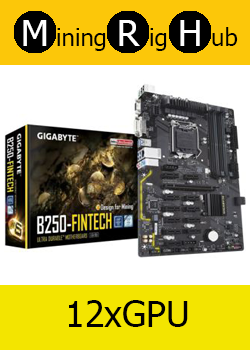
<style>
.page{position:relative;width:250px;height:350px;background:#ffffff}
.page>*{position:absolute;margin:0}
.t1{font:36px "Tahoma";color:#ffffff}
.t2{font:24px "Tahoma";color:#000000}
.t3{font:36px "Tahoma";color:#000000}
</style>
<div class="page">
<p class="t1" style="left:23px;top:20px;width:24px;height:26px">M</p>
<p class="t2" style="left:57px;top:28px;width:49px;height:23px">ining</p>
<p class="t1" style="left:119px;top:20px;width:21px;height:26px">R</p>
<p class="t2" style="left:150px;top:28px;width:17px;height:23px">ig</p>
<p class="t1" style="left:180px;top:20px;width:20px;height:26px">H</p>
<p class="t2" style="left:212px;top:27px;width:26px;height:19px">ub</p>
<p class="t3" style="left:69px;top:300px;width:119px;height:27px">12xGPU</p>
</div>
